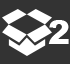
<style>
.page{position:relative;width:70px;height:64px;background:#333333}
.page>*{position:absolute;margin:0}
.t1{font:33.3px "Arial-Black";color:#ffffff}
</style>
<div class="page">
<p class="t1" style="left:48px;top:20px;width:21px;height:24px">2</p>
</div>
